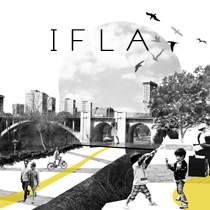
<style>
.page{position:relative;width:210px;height:210px;background:#ffffff}
.page>*{position:absolute;margin:0}
.t1{font:27px "SusannaRegular";letter-spacing:0.42em;color:#040000;font-weight:bold}
</style>
<div class="page">
<p class="t1" style="left:50px;top:29px;width:99px;height:22px">IFLA</p>
</div>
